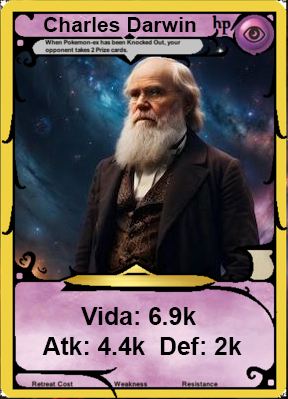
<style>
.page{position:relative;width:288px;height:399px}
.page>*{position:absolute;margin:0}
.t1{font:21.2px "Arial-BoldMT";color:#000000}
.t2{font:24.7px "Arial-BoldMT";color:#000000}
</style>
<div class="page">
<p class="t1" style="left:44px;top:17px;width:152px;height:15px">Charles Darwin</p>
<p class="t2" style="left:42px;top:307px;width:200px;height:48px;text-align:center">Vida: 6.9k <br>Atk: 4.4k  Def: 2k</p>
</div>
